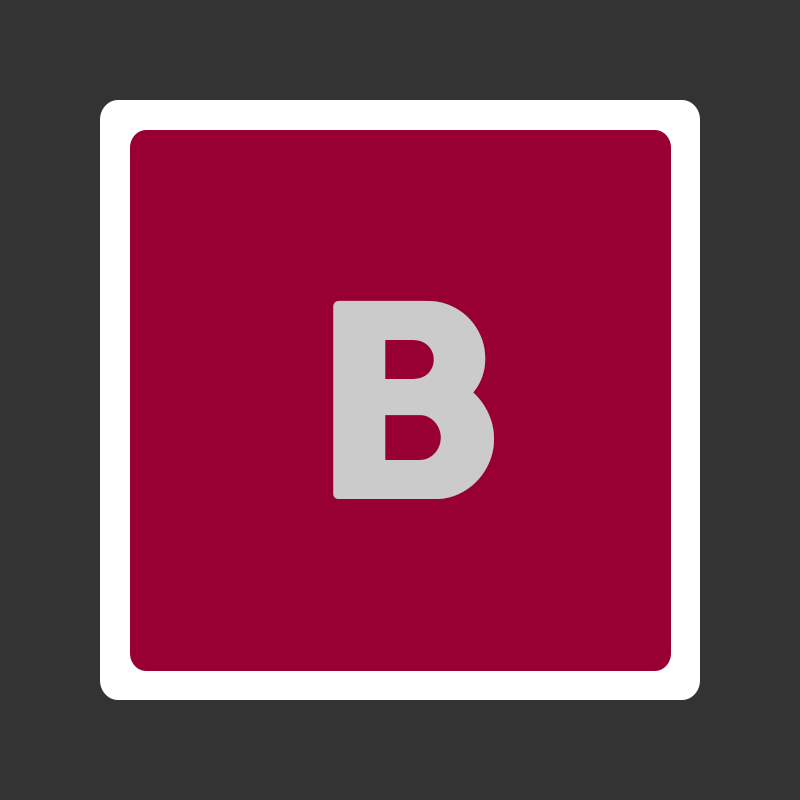
<style>
.page{position:relative;width:800px;height:800px;background:#333333}
.page>*{position:absolute;margin:0}
.t1{font:266.9px "Cocogoose";color:#cbcbcb}
</style>
<div class="page">
<p class="t1" style="left:333px;top:300px;width:161px;height:199px">B</p>
</div>
